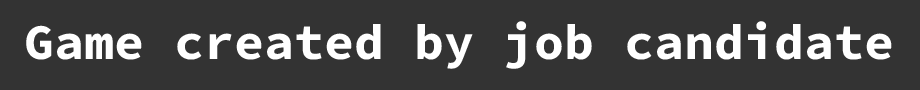
<style>
.page{position:relative;width:920px;height:90px;background:#333333}
.page>*{position:absolute;margin:0}
.t1{font:50px "SourceCodeRoman-Bold";color:#ffffff}
</style>
<div class="page">
<p class="t1" style="left:26px;top:21px;width:866px;height:48px">Game created by job candidate</p>
</div>
